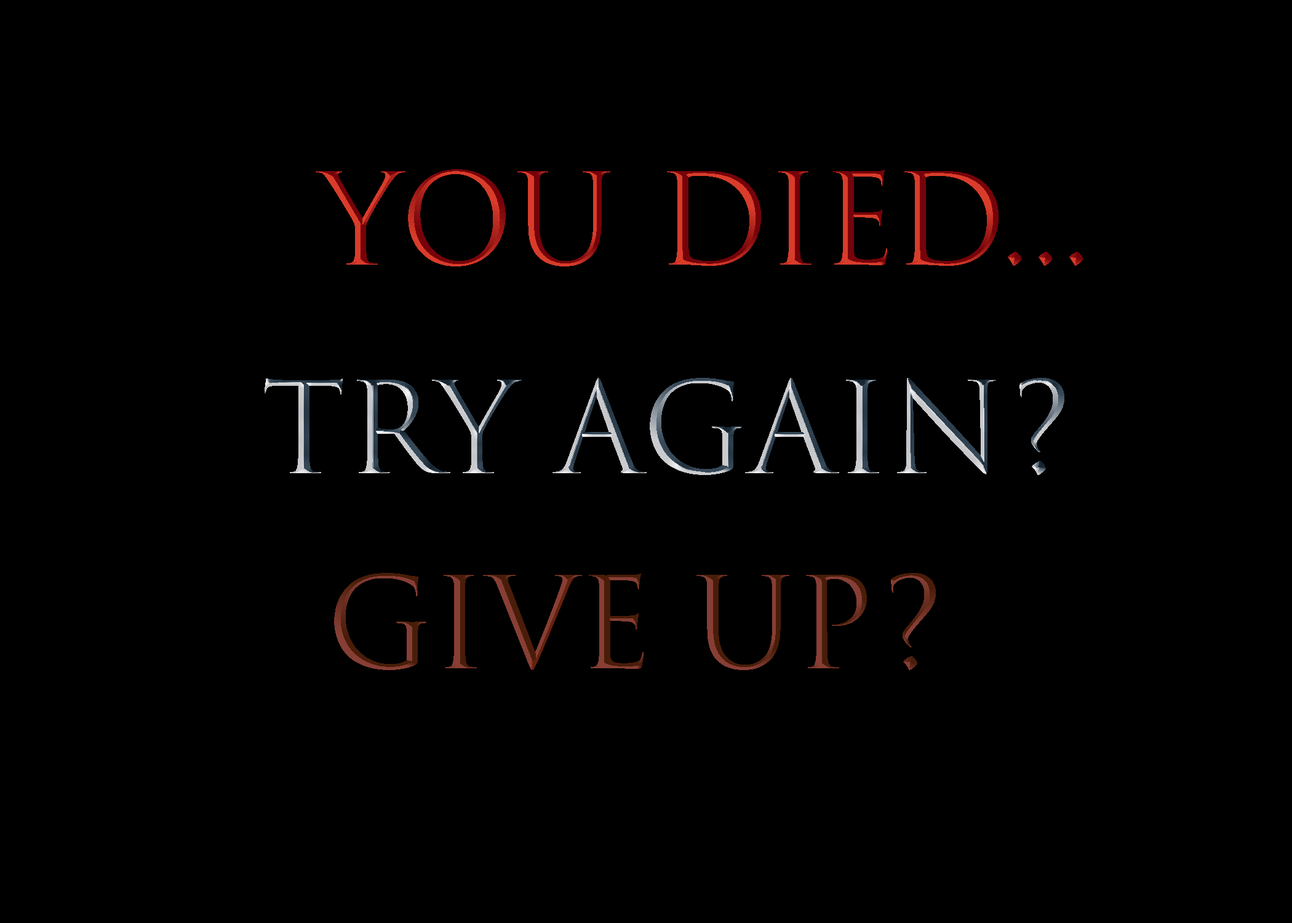
<style>
.page{position:relative;width:1292px;height:923px;background:#000000}
.page>*{position:absolute;margin:0}
.t1{font:123.1px "TrajanColor-Concept"}
</style>
<div class="page">
<p class="t1" style="left:316px;top:169px;width:767px;height:97px">YOU DIED...</p>
<p class="t1" style="left:265px;top:378px;width:799px;height:97px">TRY AGAIN?</p>
<p class="t1" style="left:334px;top:573px;width:602px;height:97px">GIVE UP?</p>
</div>
